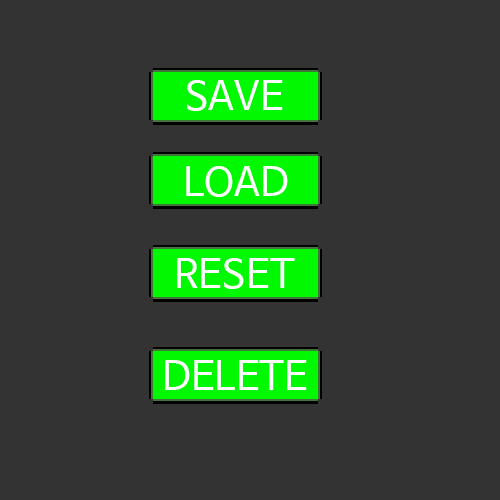
<style>
.page{position:relative;width:500px;height:500px;background:#333333}
.page>*{position:absolute;margin:0}
.t1{font:40px "NanumBarunGothic";color:#ffffff}
</style>
<div class="page">
<p class="t1" style="left:187px;top:80px;width:96px;height:31px">SAVE</p>
<p class="t1" style="left:186px;top:166px;width:102px;height:31px">LOAD</p>
<p class="t1" style="left:177px;top:258px;width:118px;height:31px">RESET</p>
<p class="t1" style="left:165px;top:360px;width:142px;height:30px">DELETE</p>
</div>
